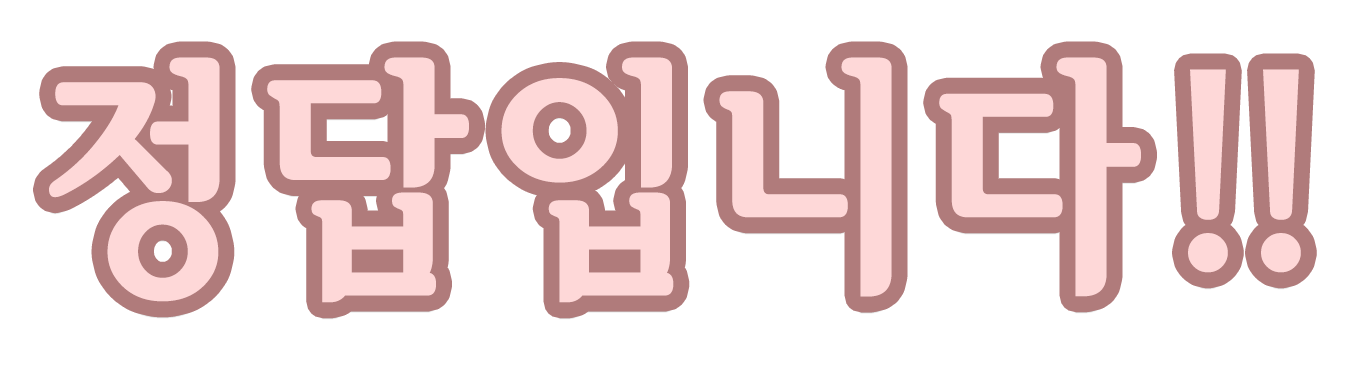
<style>
.page{position:relative;width:1368px;height:374px;background:#ffffff}
.page>*{position:absolute;margin:0}
.t1{font:250px "SeoulHangangCBL";color:#fed8d8}
</style>
<div class="page">
<p class="t1" style="left:49px;top:57px;width:1252px;height:246px">정 답 입 니 다 !!</p>
</div>
